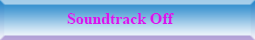
<style>
.page{position:relative;width:255px;height:40px}
.page>*{position:absolute;margin:0}
.t1{font:15.8px "TimesNewRomanPS-BoldMT";color:#d815ed}
</style>
<div class="page">
<p class="t1" style="left:67px;top:13px;width:107px;height:11px">Soundtrack Off</p>
</div>
